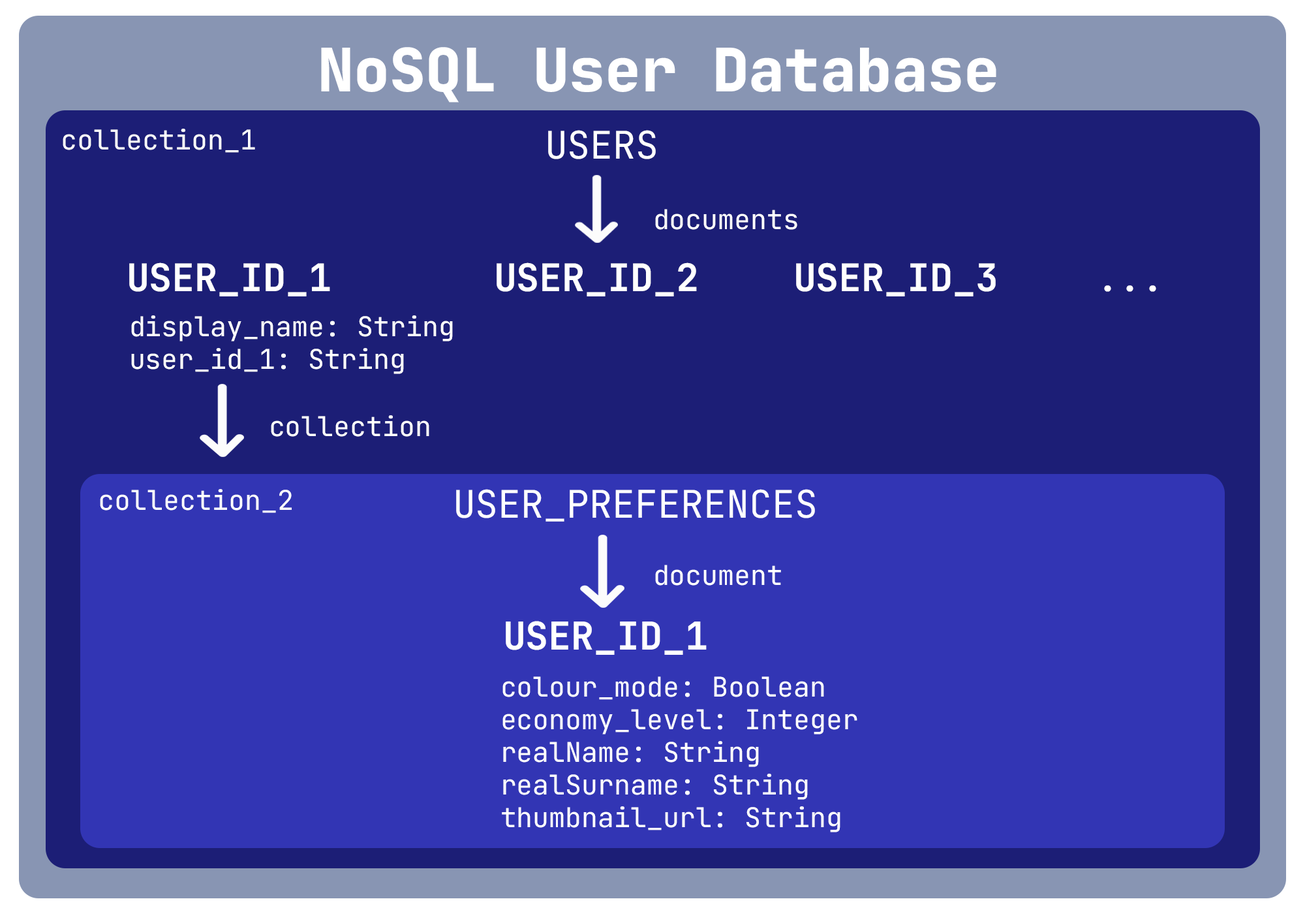
<style>
.page{position:relative;width:1305px;height:914px;background:#1c1e76}
.page>*{position:absolute;margin:0}
.t1{font:59.8px "JetBrainsMono-ExtraBold";color:#ffffff}
.t2{font:27.2px "JetBrainsMono-Variable";color:#ffffff}
.t3{font:38.1px "JetBrainsMono-Variable";color:#ffffff}
.t4{font:38.1px "JetBrainsMono-Bold";color:#ffffff}
</style>
<div class="page">
<p class="t1" style="left:321px;top:47px;width:675px;height:55px">NoSQL User Database</p>
<p class="t2" style="left:63px;top:129px;width:192px;height:24px">collection_1</p>
<p class="t3" style="left:548px;top:130px;width:108px;height:29px">USERS</p>
<p class="t2" style="left:655px;top:209px;width:142px;height:21px">documents</p>
<p class="t4" style="left:129px;top:262px;width:201px;height:34px">USER_ID_1</p>
<p class="t4" style="left:497px;top:262px;width:200px;height:34px">USER_ID_2</p>
<p class="t4" style="left:796px;top:262px;width:200px;height:34px">USER_ID_3</p>
<p class="t3" style="left:1104px;top:285px;width:52px;height:7px">...</p>
<p class="t2" style="left:131px;top:315px;width:322px;height:59px">display_name: String<br>user_id_1: String</p>
<p class="t2" style="left:271px;top:415px;width:158px;height:22px">collection</p>
<p class="t2" style="left:100px;top:489px;width:192px;height:24px">collection_2</p>
<p class="t3" style="left:456px;top:489px;width:359px;height:32px">USER_PREFERENCES</p>
<p class="t2" style="left:655px;top:564px;width:126px;height:21px">document</p>
<p class="t4" style="left:506px;top:621px;width:201px;height:34px">USER_ID_1</p>
<p class="t2" style="left:502px;top:676px;width:355px;height:156px">colour_mode: Boolean<br>economy_level: Integer<br>realName: String<br>realSurname: String<br>thumbnail_url: String</p>
</div>
